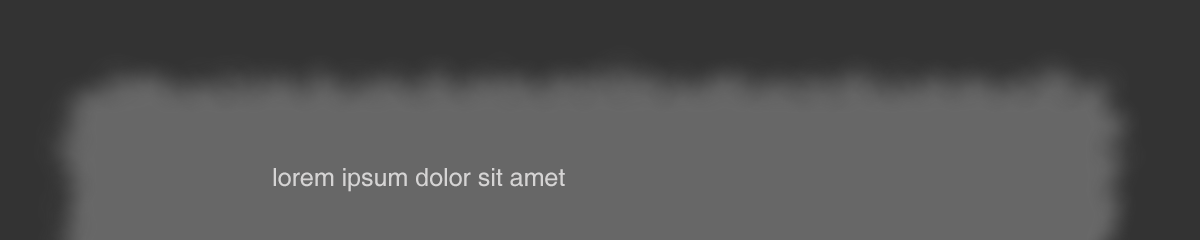
<style>
.page{position:relative;width:1200px;height:240px;background:#676767}
.page>*{position:absolute;margin:0}
.t1{font:25px "Helvetica";color:#d5d4d4}
</style>
<div class="page">
<p class="t1" style="left:273px;top:168px;width:292px;height:24px">lorem ipsum dolor sit amet</p>
</div>
